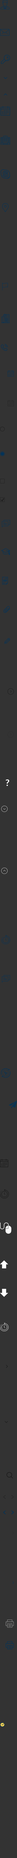
<style>
.page{position:relative;width:17px;height:1858px;background:#333333}
.page>*{position:absolute;margin:0}
.t1{font:9px "Lato-Bold";letter-spacing:0.02em;color:#ffffff;text-transform:uppercase}
</style>
<div class="page">
<p class="t1" style="left:6px;top:779px;width:3px;height:7px">?</p>
</div>
